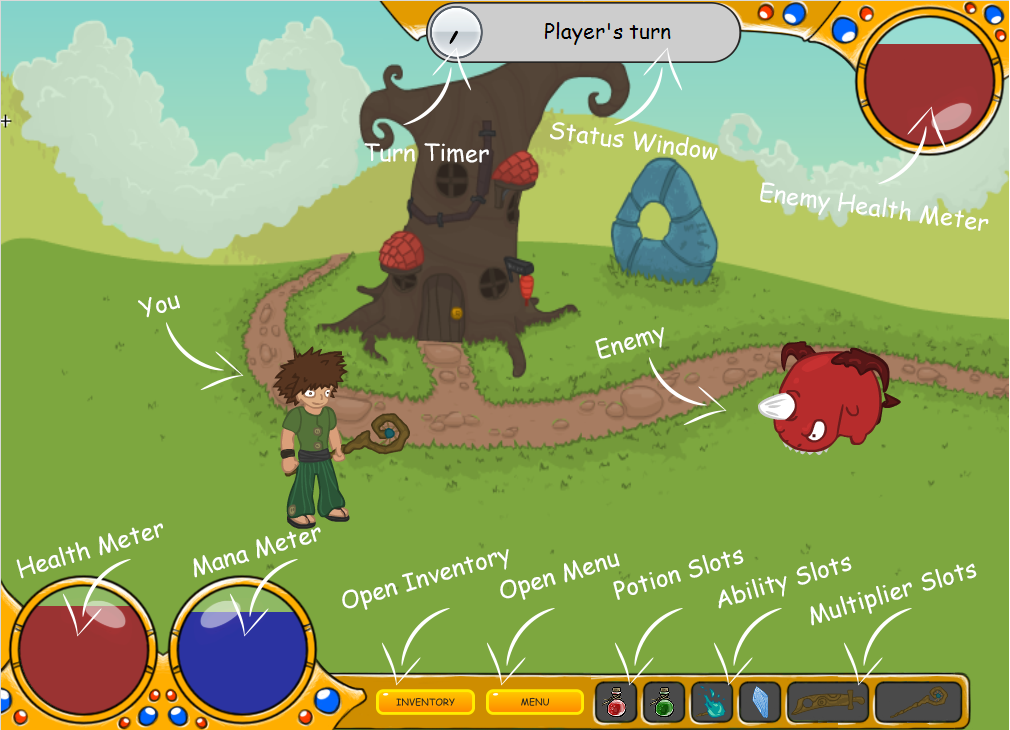
<style>
.page{position:relative;width:1010px;height:730px;background:#7da73f}
.page>*{position:absolute;margin:0}
.t1{font:24px "ComicSansMS";color:#ffffff}
</style>
<div class="page">
<p class="t1" style="left:550px;top:122px;width:168px;height:38px;rotate:7deg">Status Window</p>
<p class="t1" style="left:364px;top:143px;width:125px;height:20px">Turn Timer</p>
<p class="t1" style="left:760px;top:182px;width:229px;height:49px;rotate:8deg">Enemy Health Meter</p>
<p class="t1" style="left:138px;top:295px;width:42px;height:23px;rotate:-16deg">You</p>
<p class="t1" style="left:595px;top:327px;width:69px;height:32px;rotate:-16deg">Enemy</p>
<p class="t1" style="left:16px;top:523px;width:147px;height:56px;rotate:-16deg">Health Meter</p>
<p class="t1" style="left:193px;top:527px;width:128px;height:51px;rotate:-16deg">Mana Meter</p>
<p class="t1" style="left:342px;top:549px;width:167px;height:61px;rotate:-16deg">Open Inventory</p>
<p class="t1" style="left:500px;top:553px;width:120px;height:47px;rotate:-16deg">Open Menu</p>
<p class="t1" style="left:613px;top:549px;width:131px;height:51px;rotate:-16deg">Potion Slots</p>
<p class="t1" style="left:718px;top:556px;width:134px;height:53px;rotate:-16deg">Ability Slots</p>
<p class="t1" style="left:810px;top:563px;width:167px;height:63px;rotate:-16deg">Multiplier Slots</p>
</div>
